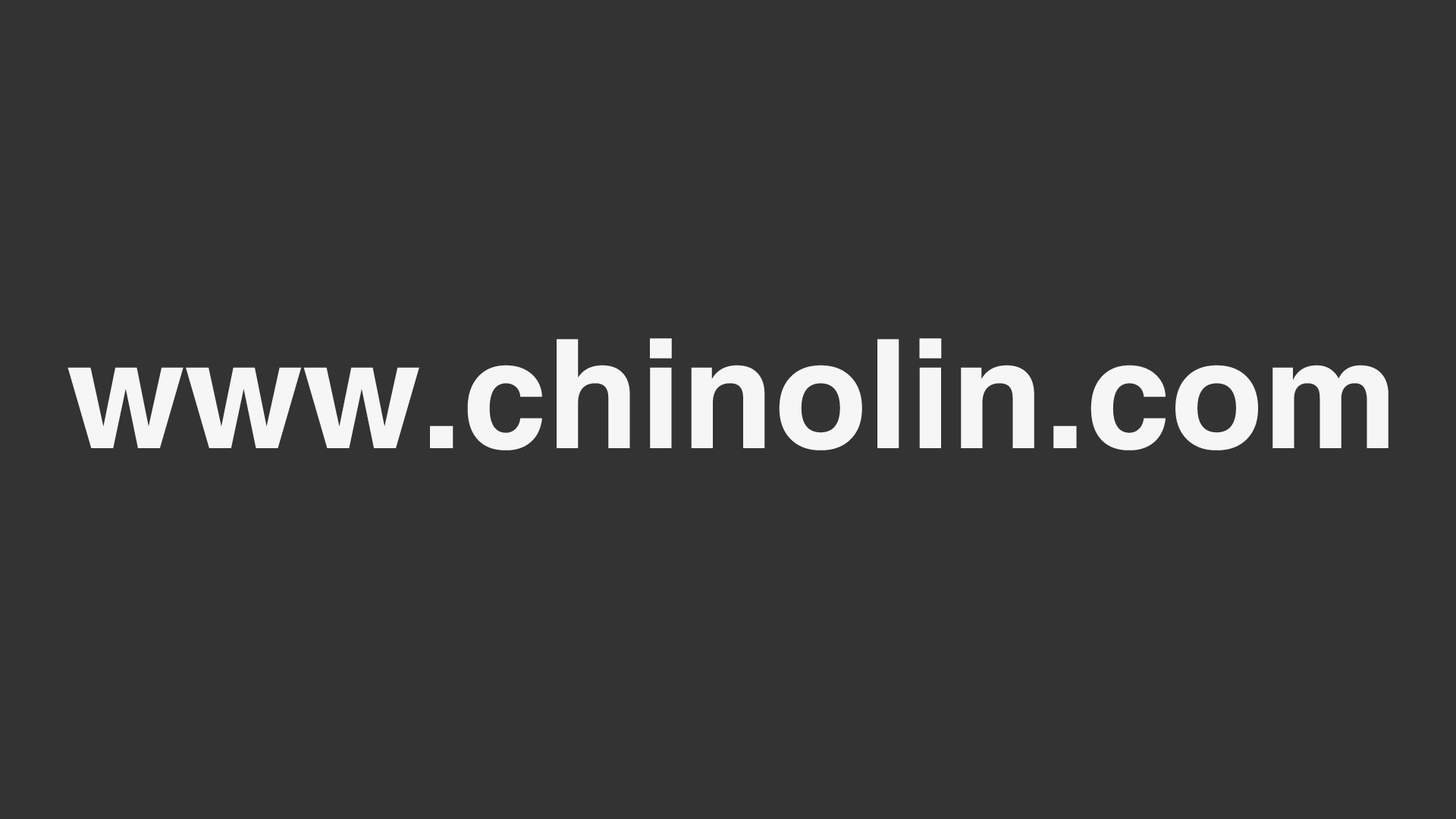
<style>
.page{position:relative;width:1456px;height:819px;background:#333333}
.page>*{position:absolute;margin:0}
.t1{font:151.7px "Helvetica-Bold";color:#f6f6f6}
</style>
<div class="page">
<p class="t1" style="left:67px;top:338px;width:1321px;height:112px">www.chinolin.com</p>
</div>
